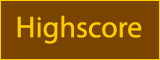
<style>
.page{position:relative;width:160px;height:60px;background:#784400}
.page>*{position:absolute;margin:0}
.t1{font:30px "MyriadHebrew-Regular";color:#ffcc00}
</style>
<div class="page">
<p class="t1" style="left:17px;top:15px;width:125px;height:29px">Highscore</p>
</div>
